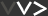
<style>
.page{position:relative;width:48px;height:16px;background:#333333}
.page>*{position:absolute;margin:0}
.t1{font:30.9px "PTSans-Caption";color:#4e4d49;text-transform:uppercase;scale:0.94 1}
.t2{font:30.9px "PTSans-Caption";color:#ffffff;text-transform:uppercase;scale:0.94 1}
</style>
<div class="page">
<p class="t1" style="left:0px;top:1px;width:16px;height:14px;rotate:90deg">&gt;</p>
<p class="t2" style="left:16px;top:1px;width:16px;height:14px;rotate:90deg">&gt;</p>
<p class="t2" style="left:33px;top:1px;width:14px;height:15px">&gt;</p>
</div>
